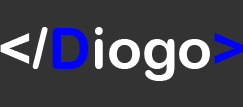
<style>
.page{position:relative;width:243px;height:107px;background:#333333}
.page>*{position:absolute;margin:0}
.t1{font:58.3px "ArialRoundedMTBold";color:#ffffff}
.t2{font:58.3px "ArialRoundedMTBold";color:#0000ff}
</style>
<div class="page">
<p class="t1" style="left:0px;top:27px;width:244px;height:54px">&lt;/<span class="t2">D</span>iogo<span class="t2">&gt;</span></p>
</div>
